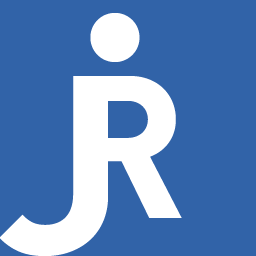
<style>
.page{position:relative;width:256px;height:256px;background:#3163a8}
.page>*{position:absolute;margin:0}
.t1{font:150px "DINPro-Light";color:#ffffff;text-transform:uppercase}
.t2{font:250px "DINPro-Bold";color:#ffffff;text-transform:uppercase}
.t3{font:200px "DINPro-Bold";color:#ffffff;text-transform:uppercase}
</style>
<div class="page">
<p class="t1" style="left:90px;top:13px;width:50px;height:49px">•</p>
<p class="t2" style="left:0px;top:76px;width:108px;height:180px">J</p>
<p class="t3" style="left:74px;top:76px;width:108px;height:142px">R</p>
</div>
